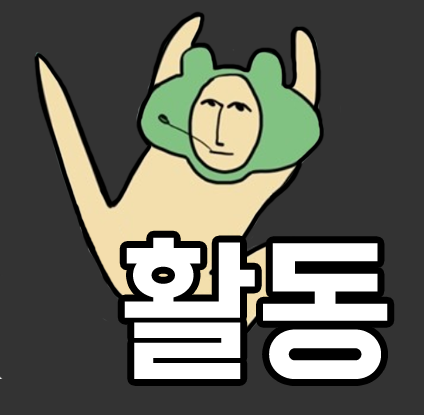
<style>
.page{position:relative;width:424px;height:415px;background:#333333}
.page>*{position:absolute;margin:0}
.t1{font:144px "BMDoHyeon";color:#ffffff}
</style>
<div class="page">
<p class="t1" style="left:124px;top:237px;width:264px;height:142px">활동</p>
</div>
